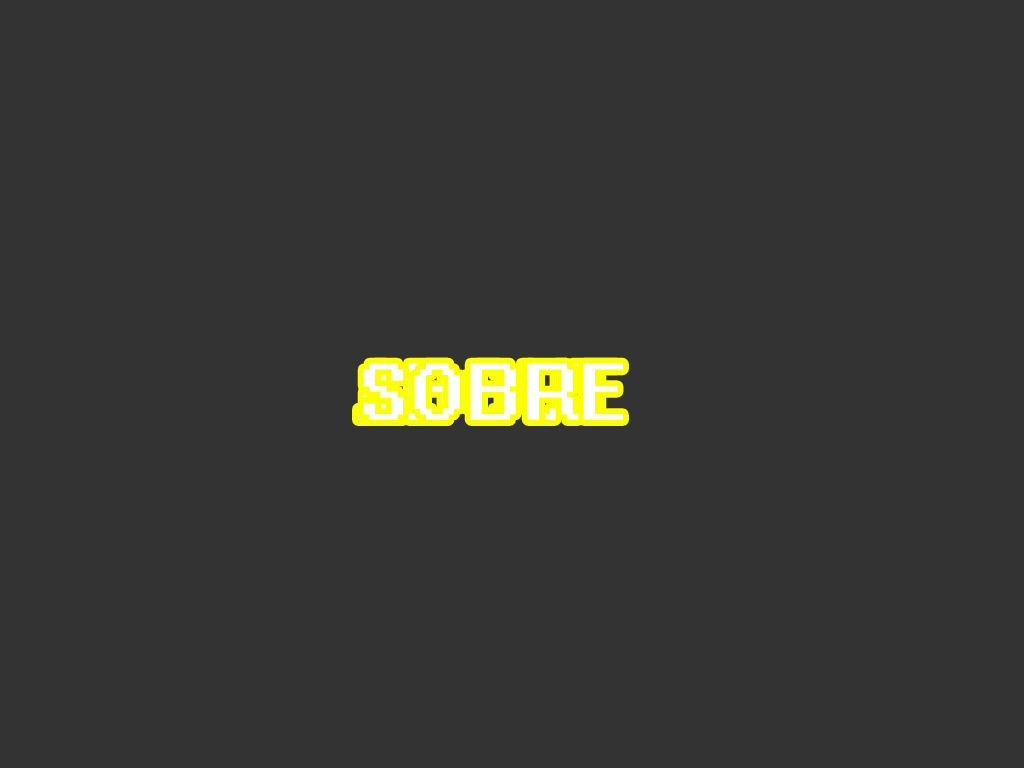
<style>
.page{position:relative;width:1024px;height:768px;background:#333333}
.page>*{position:absolute;margin:0}
.t1{font:72px "System";color:#ffffff}
</style>
<div class="page">
<p class="t1" style="left:363px;top:363px;width:260px;height:57px">SOBRE</p>
</div>
